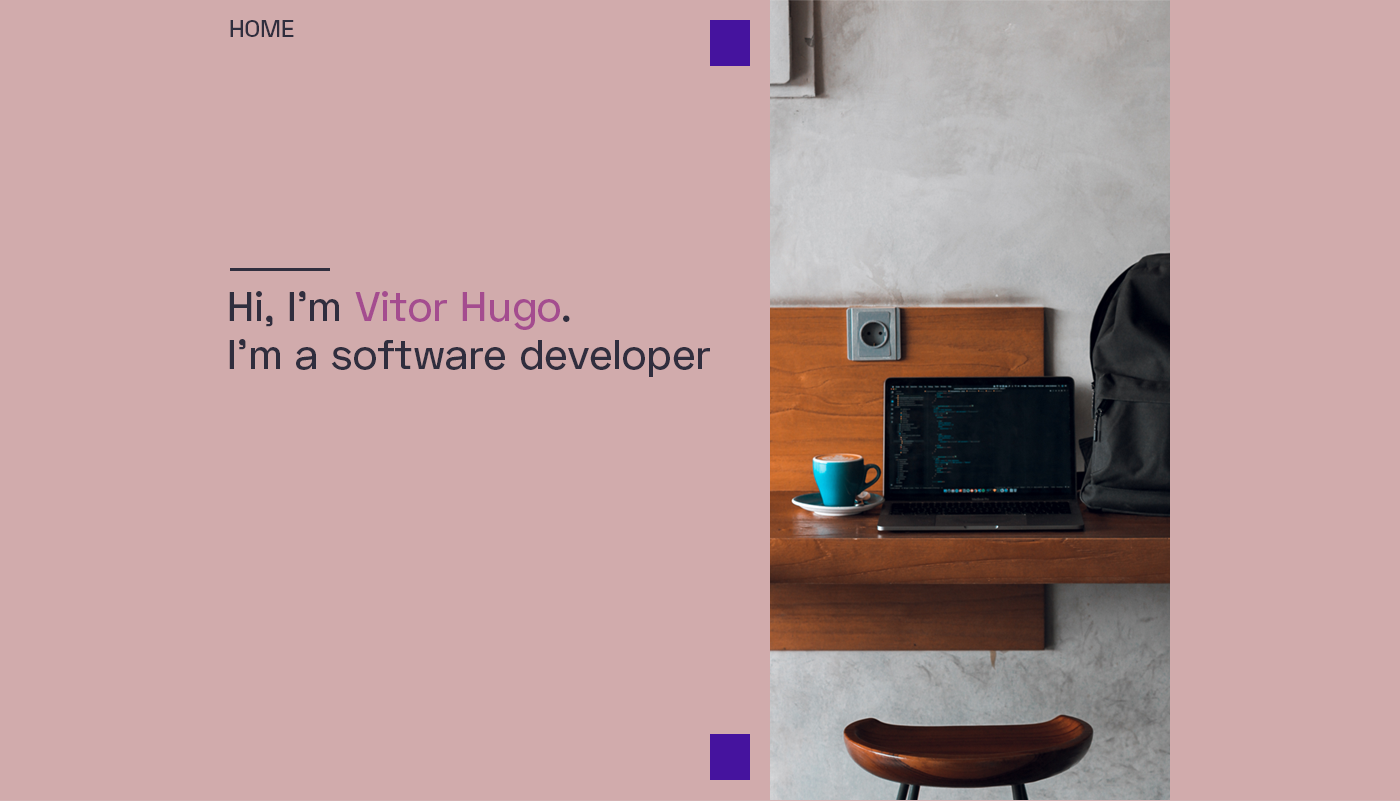
<style>
.page{position:relative;width:1400px;height:801px;background:#d1abac}
.page>*{position:absolute;margin:0}
.t1{font:24px "SpaceGrotesk-Medium";color:#302e3e}
.t2{font:42px "SpaceGrotesk-Medium";color:#a44c8f}
.t3{font:42px "SpaceGrotesk-Medium";color:#302e3e}
</style>
<div class="page">
<p class="t1" style="left:230px;top:20px;width:64px;height:17px">HOME</p>
<p class="t2" style="left:229px;top:291px;width:341px;height:39px"><span class="t3">Hi, I’m </span>Vitor Hugo<span class="t3">.</span></p>
<p class="t3" style="left:229px;top:339px;width:481px;height:38px">I’m a software developer</p>
</div>
